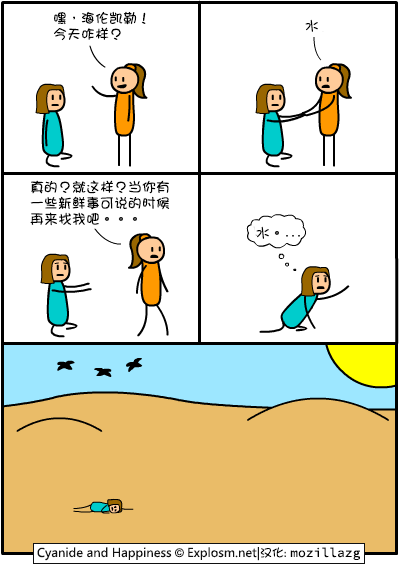
<style>
.page{position:relative;width:399px;height:565px;background:#ffffff}
.page>*{position:absolute;margin:0}
.t1{font:14px/16px "DFGirl";color:#000000}
.t2{font:14px "DFGirl";color:#000000}
.t3{font:6px "DFGirl";color:#000000}
</style>
<div class="page">
<p class="t1" style="left:54px;top:11px;width:92px;height:30px">嘿，海伦凯勒！<br>今天咋样？</p>
<p class="t2" style="left:305px;top:19px;width:13px;height:13px">水</p>
<p class="t1" style="left:30px;top:180px;width:140px;height:46px">真的？就这样？当你有<br>一些新鲜事可说的时候<br>再来找我吧。。。</p>
<p class="t3" style="left:256px;top:226px;width:44px;height:13px"><span class="t2">水。</span>。。。</p>
</div>
